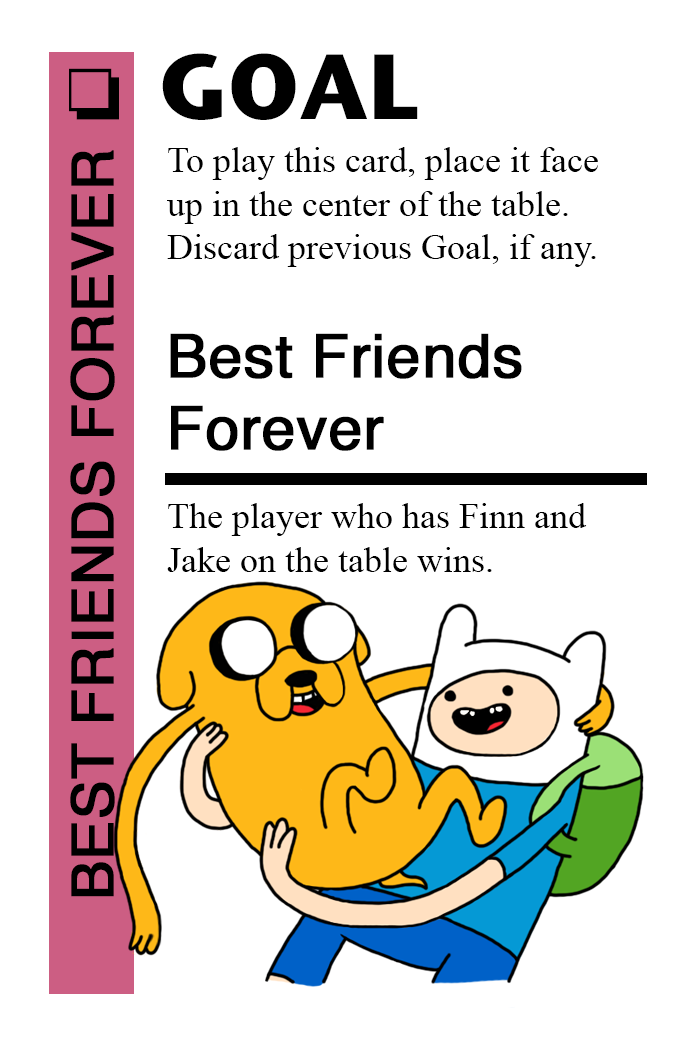
<style>
.page{position:relative;width:700px;height:1042px;background:#ffffff}
.page>*{position:absolute;margin:0}
.t1{font:92px "StoneSansITC-Bold";color:#000000}
.t2{font:72px "MS-Gothic";color:#000000}
.t3{font:58px "Helvetica";color:#000000;font-weight:bold}
.t4{font:36px "TimesNewRomanPSMT";color:#000000}
.t5{font:60px "Helvetica";color:#000000;font-weight:bold}
</style>
<div class="page">
<p class="t1" style="left:162px;top:53px;width:256px;height:67px">GOAL</p>
<p class="t2" style="left:69px;top:68px;width:50px;height:52px">❏</p>
<p class="t3" style="left:70px;top:150px;width:45px;height:747px;rotate:-90deg">BEST FRIENDS FOREVER</p>
<p class="t4" style="left:167px;top:147px;width:431px;height:120px">To play this card, place it face<br>up in the center of the table.<br>Discard previous Goal, if any.</p>
<p class="t5" style="left:170px;top:333px;width:352px;height:118px">Best Friends<br>Forever</p>
<p class="t4" style="left:167px;top:503px;width:420px;height:69px">The player who has Finn and<br>Jake on the table wins.</p>
</div>
